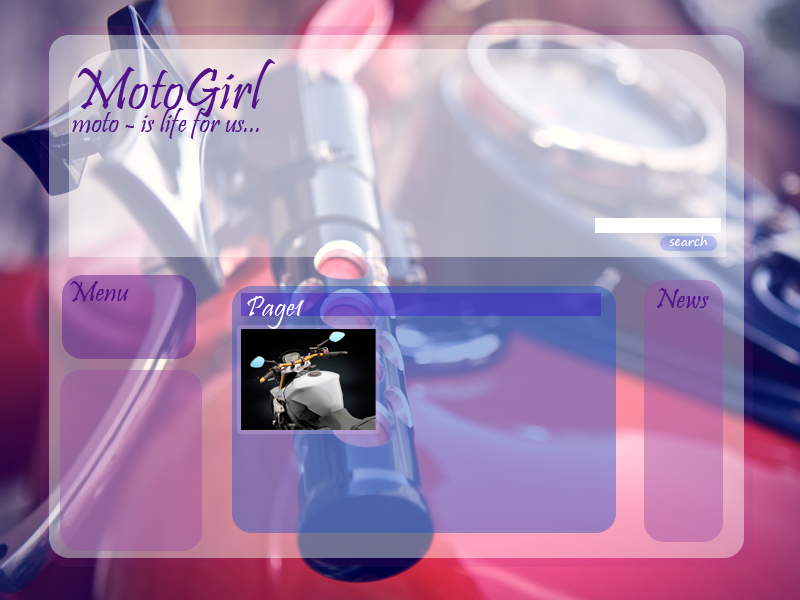
<style>
.page{position:relative;width:800px;height:600px}
.page>*{position:absolute;margin:0}
.t1{font:60px "Pristina-Regular";color:#51128c}
.t2{font:30px "Pristina-Regular";color:#51128c}
.t3{font:12px "SegoePrint";color:#ffffff}
.t4{font:30px "Pristina-Regular";color:#ffffff}
</style>
<div class="page">
<p class="t1" style="left:78px;top:59px;width:197px;height:58px">MotoGirl</p>
<p class="t2" style="left:72px;top:108px;width:187px;height:31px">moto - is life for us...</p>
<p class="t3" style="left:669px;top:236px;width:39px;height:10px">search</p>
<p class="t2" style="left:70px;top:281px;width:59px;height:21px">Menu</p>
<p class="t2" style="left:656px;top:288px;width:53px;height:20px">News</p>
<p class="t4" style="left:247px;top:296px;width:57px;height:33px">Page1</p>
</div>
